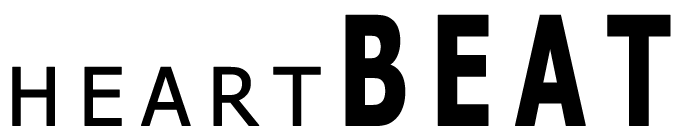
<style>
.page{position:relative;width:683px;height:140px;background:#ffffff}
.page>*{position:absolute;margin:0}
.t1{font:80px "Tahoma";letter-spacing:0.2em;color:#000000;font-weight:bold}
.t2{font:151.5px "Tahoma-Bold";letter-spacing:0.2em;color:#000000;font-weight:bold;scale:0.67 1}
</style>
<div class="page">
<p class="t1" style="left:12px;top:14px;width:659px;height:112px">HEART<span class="t2">BEAT</span></p>
</div>
